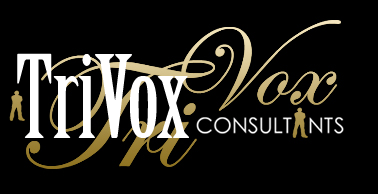
<style>
.page{position:relative;width:378px;height:194px;background:#000000}
.page>*{position:absolute;margin:0}
.t1{font:112px "BirchStd";color:#ffffff}
</style>
<div class="page">
<p class="t1" style="left:17px;top:53px;width:172px;height:85px">TriVox</p>
</div>
